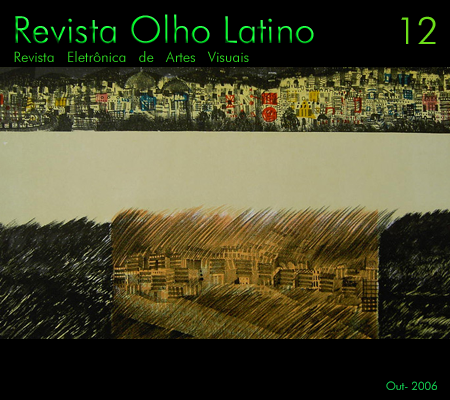
<style>
.page{position:relative;width:450px;height:400px;background:#000000}
.page>*{position:absolute;margin:0}
.t1{font:37.5px "FuturaBT-Light"}
.t2{font:37.5px "FuturaBT-Light";color:#6dde1a}
.t3{font:14.4px "FuturaBT-Light";color:#30df23}
.t4{font:11.4px "FuturaBT-Light";color:#11b748}
</style>
<div class="page">
<p class="t1" style="left:15px;top:14px;width:299px;height:30px">Revista Olho Latino</p>
<p class="t2" style="left:401px;top:16px;width:35px;height:28px">12</p>
<p class="t3" style="left:14px;top:51px;width:235px;height:11px">Revista   Eletrônica   de   Artes   Visuais</p>
<p class="t4" style="left:386px;top:381px;width:51px;height:9px">Out- 2006</p>
</div>
